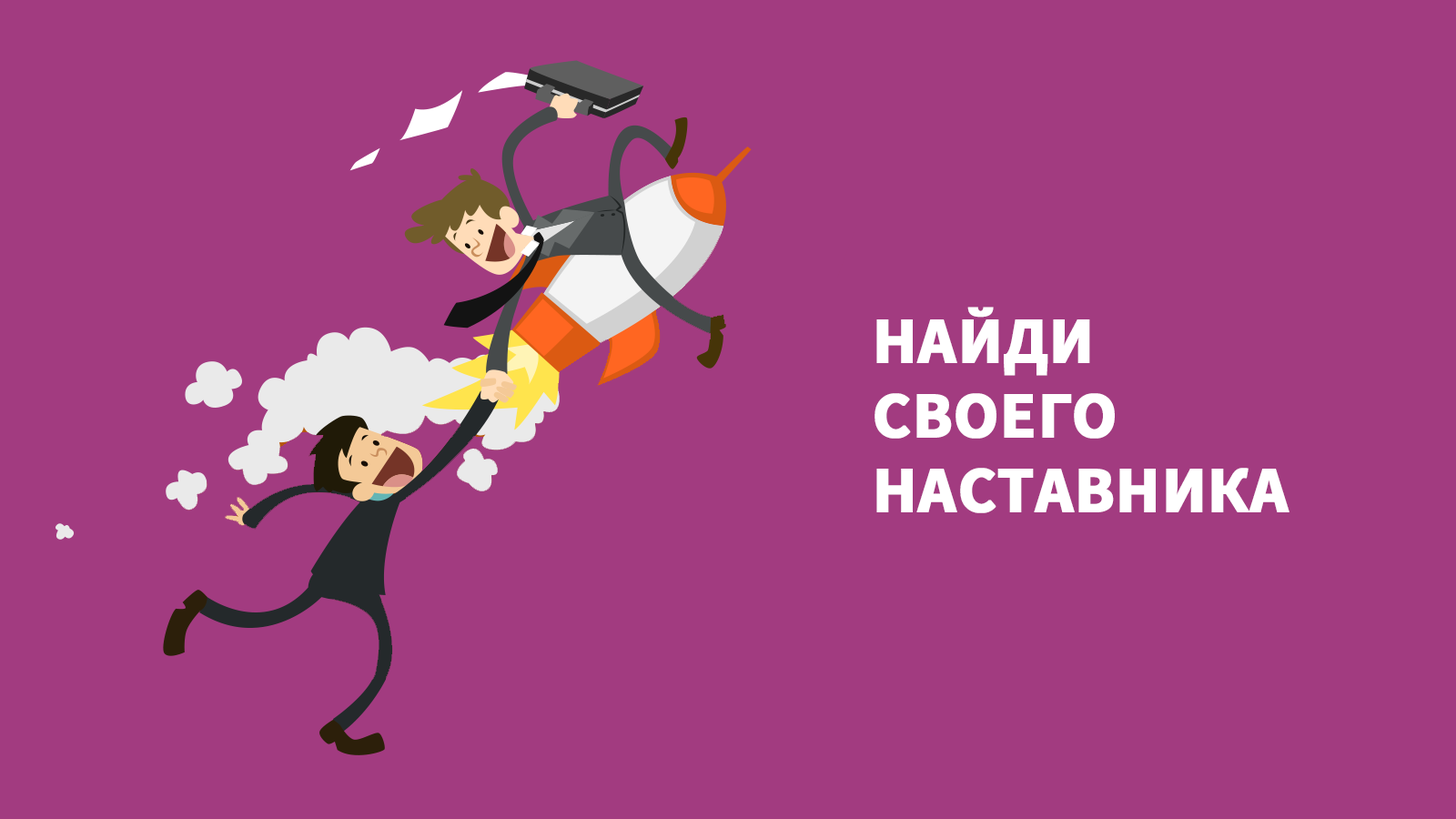
<style>
.page{position:relative;width:1456px;height:819px;background:#a23b80}
.page>*{position:absolute;margin:0}
.t1{font:65.5px/65.5px "SourceSansPro-Bold";color:#ffffff;text-transform:uppercase;font-weight:bold}
</style>
<div class="page">
<p class="t1" style="left:874px;top:307px;width:415px;height:206px">найди<br>своего <br>наставника</p>
</div>
